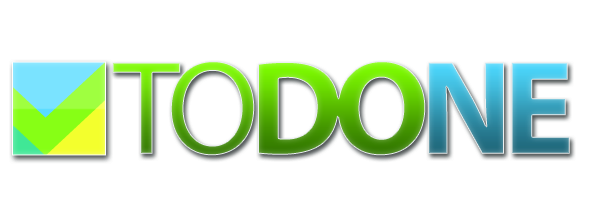
<style>
.page{position:relative;width:600px;height:200px;background:#ffffff}
.page>*{position:absolute;margin:0}
.t1{font:135.1px "MyriadPro-Regular";letter-spacing:-0.075em}
.t2{font:135.1px "MyriadPro-Bold";letter-spacing:-0.075em}
</style>
<div class="page">
<p class="t1" style="left:112px;top:61px;width:458px;height:95px">TO<span class="t2">DO</span><span class="t2">NE</span></p>
</div>
